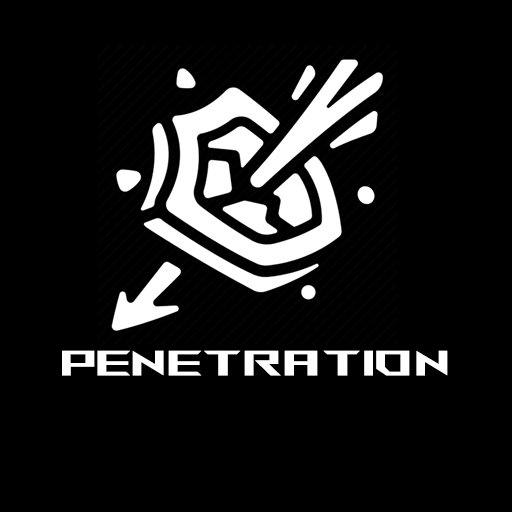
<style>
.page{position:relative;width:512px;height:512px;background:#000000}
.page>*{position:absolute;margin:0}
.t1{font:35.4px "AniMeMatrix-MB_EN";color:#ffffff;scale:1.18 1}
</style>
<div class="page">
<p class="t1" style="left:62px;top:350px;width:386px;height:26px">penetration</p>
</div>
